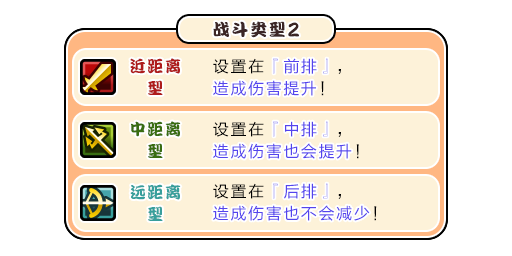
<style>
.page{position:relative;width:512px;height:256px;background:#ffffff}
.page>*{position:absolute;margin:0}
.t1{font:17px "DFPKanTingLiuW9";letter-spacing:0.1em;color:#3b2626}
.t2{font:20.4px "DFPKanTingLiuW9";letter-spacing:0.1em;color:#3b2626;scale:0.83 1}
.t3{font:16px/22px "DFPKanTingLiuW9";letter-spacing:0.1em;color:#ae1c1c}
.t4{font:16px/22px "FZLTHJW--GB1-0";letter-spacing:0.1em;color:#5444ed}
.t5{font:16px/22px "FZLTHJW--GB1-0";letter-spacing:0.1em;color:#000000}
.t6{font:16px "FZLTHJW--GB1-0";letter-spacing:0.1em;color:#5444ed}
.t7{font:16px/22px "DFPKanTingLiuW9";letter-spacing:0.1em;color:#396d12}
.t8{font:16px/22px "DFPKanTingLiuW9";letter-spacing:0.1em;color:#389f9c}
</style>
<div class="page">
<p class="t1" style="left:213px;top:21px;width:86px;height:17px">战斗类型<span class="t2">2</span></p>
<p class="t3" style="left:130px;top:58px;width:51px;height:37px;text-align:center">近距离<br>型</p>
<p class="t4" style="left:213px;top:58px;width:128px;height:38px"><span class="t5">设置在</span>『前排』<span class="t5">，<br></span>造成伤害提升<span class="t5">！</span></p>
<p class="t6" style="left:273px;top:58px;width:55px;height:16px">『前排』</p>
<p class="t6" style="left:213px;top:80px;width:103px;height:16px">造成伤害提升</p>
<p class="t7" style="left:131px;top:121px;width:50px;height:37px;text-align:center">中距离<br>型</p>
<p class="t4" style="left:213px;top:121px;width:146px;height:38px"><span class="t5">设置在</span>『中排』<span class="t5">，<br></span>造成伤害也会提升<span class="t5">！</span></p>
<p class="t6" style="left:273px;top:121px;width:55px;height:16px">『中排』</p>
<p class="t6" style="left:213px;top:143px;width:139px;height:16px">造成伤害也会提升</p>
<p class="t8" style="left:130px;top:184px;width:51px;height:37px;text-align:center">远距离<br>型</p>
<p class="t4" style="left:213px;top:183px;width:164px;height:38px"><span class="t5">设置在</span>『后排』<span class="t5">，<br></span>造成伤害也不会减少<span class="t5">！</span></p>
<p class="t6" style="left:273px;top:183px;width:55px;height:16px">『后排』</p>
<p class="t6" style="left:213px;top:205px;width:157px;height:16px">造成伤害也不会减少</p>
</div>
